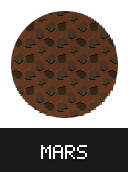
<style>
.page{position:relative;width:128px;height:172px;background:#ffffff}
.page>*{position:absolute;margin:0}
.t1{font:15.9px "pixelmix";color:#ffffff}
</style>
<div class="page">
<p class="t1" style="left:41px;top:145px;width:46px;height:14px">MARS</p>
</div>
